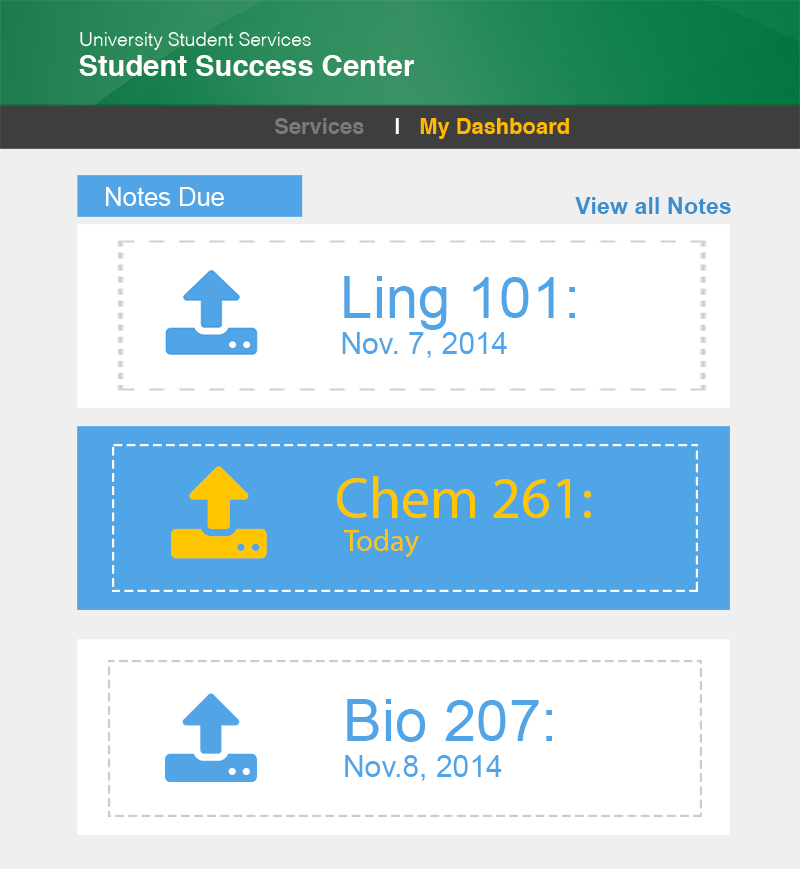
<style>
.page{position:relative;width:800px;height:869px;background:#ffffff}
.page>*{position:absolute;margin:0}
.t1{font:29.2px "Helvetica-Bold";color:#ffffff}
.t2{font:21.9px "Helvetica-Bold";color:#ffba00}
.t3{font:21.9px "Helvetica-Bold";color:#7a7a7a}
.t4{font:21.9px "Helvetica-Bold";color:#ffffff}
.t5{font:25.5px "ArialMT";color:#ffffff}
.t6{font:23.3px "Arial-BoldMT";color:#3a8ece}
.t7{font:30px "ArialMT";color:#51a5e6}
.t8{font:58.4px "ArialMT";color:#51a5e6}
.t9{font:58.4px "MyriadPro-Regular";color:#ffc600}
.t10{font:30px "MyriadPro-Regular";color:#ffc600}
</style>
<div class="page">
<p class="t1" style="left:79px;top:55px;width:335px;height:21px">Student Success Center</p>
<p class="t2" style="left:275px;top:118px;width:294px;height:21px"><span class="t3">Services</span><span class="t4">     |   </span>My Dashboard</p>
<p class="t5" style="left:106px;top:187px;width:118px;height:19px">Notes Due</p>
<p class="t6" style="left:575px;top:197px;width:156px;height:17px">View all Notes</p>
<p class="t7" style="left:342px;top:276px;width:233px;height:82px"><span class="t8">Ling 101: <br></span>Nov. 7, 2014</p>
<p class="t9" style="left:337px;top:476px;width:254px;height:42px">Chem 261:</p>
<p class="t10" style="left:344px;top:529px;width:75px;height:29px">Today</p>
<p class="t7" style="left:345px;top:699px;width:207px;height:82px"><span class="t8">Bio 207:<br></span>Nov.8, 2014</p>
</div>
